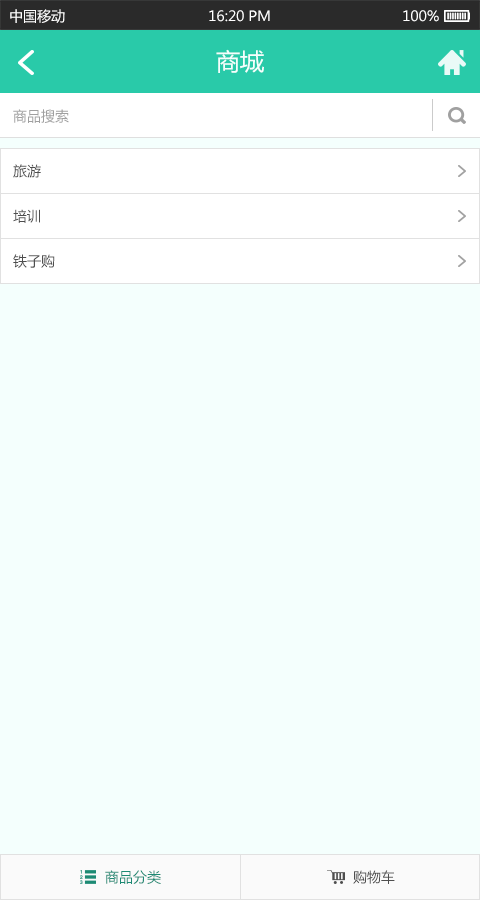
<style>
.page{position:relative;width:480px;height:900px;background:#f4fffd}
.page>*{position:absolute;margin:0}
.t1{font:14px "MicrosoftYaHei";color:#ffffff}
.t2{font:24px "MicrosoftYaHei";color:#f4fffd}
.t3{font:14px "MicrosoftYaHei";color:#a0a0a0}
.t4{font:14px "MicrosoftYaHei";color:#4e4e4e}
.t5{font:14px "MicrosoftYaHei";color:#1d8a74}
</style>
<div class="page">
<p class="t1" style="left:10px;top:9px;width:55px;height:14px">中国移动</p>
<p class="t1" style="left:209px;top:10px;width:61px;height:12px">16:20 PM</p>
<p class="t1" style="left:403px;top:10px;width:36px;height:12px">100%</p>
<p class="t2" style="left:216px;top:49px;width:48px;height:24px">商城</p>
<p class="t3" style="left:13px;top:109px;width:56px;height:14px">商品搜索</p>
<p class="t4" style="left:13px;top:164px;width:28px;height:14px">旅游</p>
<p class="t4" style="left:13px;top:209px;width:27px;height:14px">培训</p>
<p class="t4" style="left:13px;top:254px;width:42px;height:14px">铁子购</p>
<p class="t5" style="left:105px;top:870px;width:56px;height:14px">商品分类</p>
<p class="t4" style="left:353px;top:870px;width:42px;height:14px">购物车</p>
</div>
